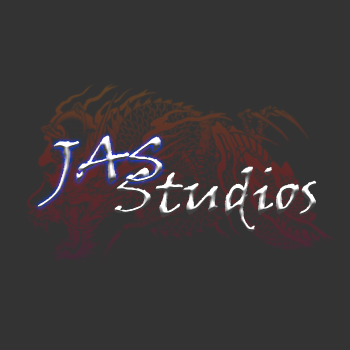
<style>
.page{position:relative;width:350px;height:350px;background:#333333}
.page>*{position:absolute;margin:0}
.t1{font:60px "VinerHandITC"}
.t2{font:60.2px "VinerHandITC"}
</style>
<div class="page">
<p class="t1" style="left:37px;top:135px;width:126px;height:73px">JAS</p>
<p class="t2" style="left:114px;top:166px;width:203px;height:67px">Studios</p>
</div>
